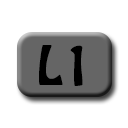
<style>
.page{position:relative;width:128px;height:128px;background:#ffffff}
.page>*{position:absolute;margin:0}
.t1{font:48px "HoboStd";color:#000000}
</style>
<div class="page">
<p class="t1" style="left:39px;top:45px;width:44px;height:41px">L1</p>
</div>
